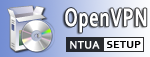
<style>
.page{position:relative;width:150px;height:57px}
.page>*{position:absolute;margin:0}
.t1{font:27px "Corbel-Bold";letter-spacing:0.05em;color:#ffffff;scale:0.67 1}
.t2{font:11px "Corbel";letter-spacing:0.025em;color:#ffffff;font-weight:bold}
.t3{font:11px "Corbel-Bold";letter-spacing:0.025em;color:#000000}
</style>
<div class="page">
<p class="t1" style="left:65px;top:8px;width:82px;height:25px">OpenVPN</p>
<p class="t2" style="left:70px;top:41px;width:30px;height:8px">NTUA</p>
<p class="t3" style="left:107px;top:41px;width:34px;height:7px">SETUP</p>
</div>
